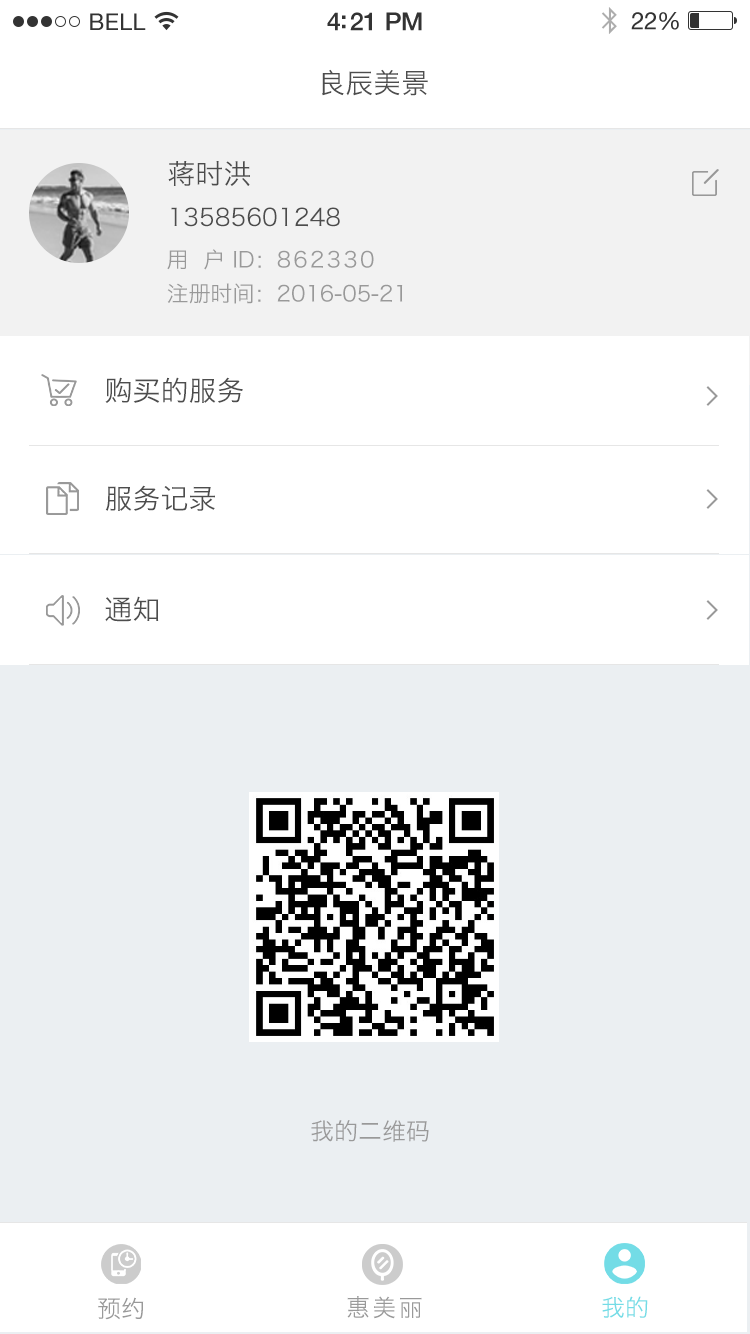
<style>
.page{position:relative;width:750px;height:1334px;background:#ffffff}
.page>*{position:absolute;margin:0}
.t1{font:28px "HiraginoSansGB-W3";color:#4d4d4d}
.t2{font:24px/42px "HiraginoSansGB-W3";color:#4c4c4c}
.t3{font:28px/42px "HiraginoSansGB-W3";color:#4c4c4c}
.t4{font:22px/34px "HiraginoSansGB-W3";color:#999999}
.t5{font:22px "HiraginoSansGB-W3";letter-spacing:0.1em;color:#999999}
.t6{font:24px "HiraginoSansGB-W3";color:#999999}
.t7{font:24px "HiraginoSansGB-W3";letter-spacing:0.1em;color:#999999}
.t8{font:24px "HiraginoSansGB-W3";color:#73dce6}
</style>
<div class="page">
<p class="t1" style="left:322px;top:69px;width:106px;height:27px">良辰美景</p>
<p class="t2" style="left:168px;top:161px;width:172px;height:66px;text-align:justify"><span class="t3">蒋时洪                                <br></span>13585601248</p>
<p class="t4" style="left:167px;top:249px;width:236px;height:55px;text-align:justify">用  户 ID：<span class="t5">862330<br></span>注册时间：2016-05-21</p>
<p class="t1" style="left:105px;top:377px;width:138px;height:26px">购买的服务</p>
<p class="t1" style="left:105px;top:485px;width:110px;height:26px">服务记录</p>
<p class="t1" style="left:105px;top:596px;width:54px;height:26px">通知</p>
<p class="t6" style="left:311px;top:1120px;width:118px;height:22px">我的二维码</p>
<p class="t6" style="left:98px;top:1297px;width:46px;height:23px">预约</p>
<p class="t7" style="left:347px;top:1296px;width:75px;height:23px">惠美丽</p>
<p class="t8" style="left:602px;top:1296px;width:46px;height:22px">我的</p>
</div>
